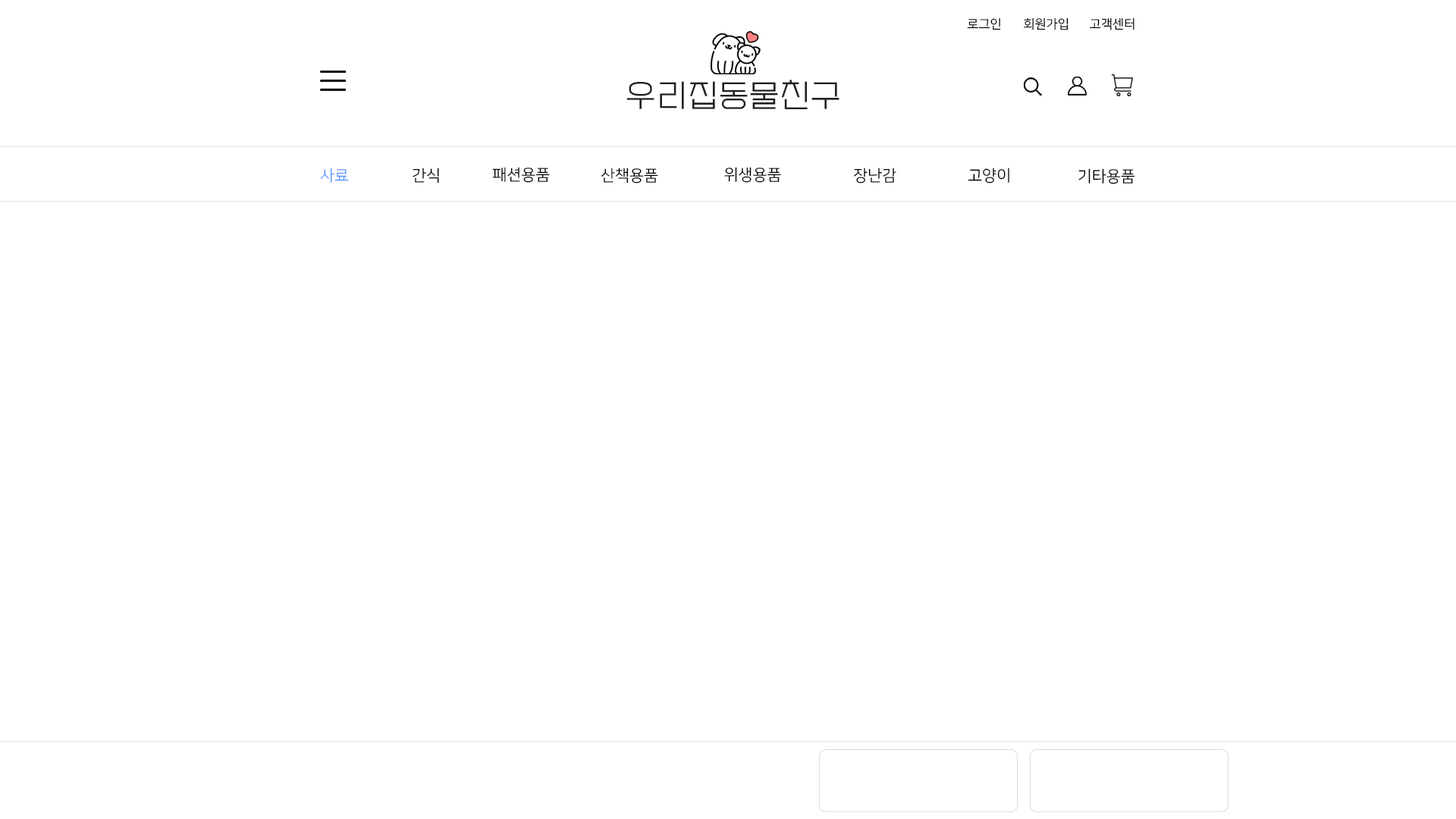
<style>
.page{position:relative;width:1456px;height:819px;background:#ffffff}
.page>*{position:absolute;margin:0}
.t1{font:12.6px "NanumSquareR";color:#000000}
.t2{font:31.6px "EF_watermelonSalad";letter-spacing:0.025em;color:#202020}
.t3{font:15.8px "NanumSquareR";color:#669aff}
.t4{font:15.8px "NanumSquareR";color:#000000}
</style>
<div class="page">
<p class="t1" style="left:967px;top:17px;width:34px;height:13px">로그인</p>
<p class="t1" style="left:1024px;top:17px;width:44px;height:13px">회원가입</p>
<p class="t1" style="left:1090px;top:17px;width:44px;height:13px">고객센터</p>
<p class="t2" style="left:626px;top:80px;width:213px;height:29px">우리집동물친구</p>
<p class="t3" style="left:320px;top:168px;width:29px;height:15px">사료</p>
<p class="t4" style="left:413px;top:168px;width:26px;height:16px">간식</p>
<p class="t4" style="left:492px;top:167px;width:58px;height:16px">패션용품</p>
<p class="t4" style="left:601px;top:168px;width:57px;height:16px">산책용품</p>
<p class="t4" style="left:724px;top:167px;width:57px;height:16px">위생용품</p>
<p class="t4" style="left:854px;top:168px;width:42px;height:16px">장난감</p>
<p class="t4" style="left:968px;top:168px;width:41px;height:16px">고양이</p>
<p class="t4" style="left:1078px;top:168px;width:57px;height:16px">기타용품</p>
</div>
